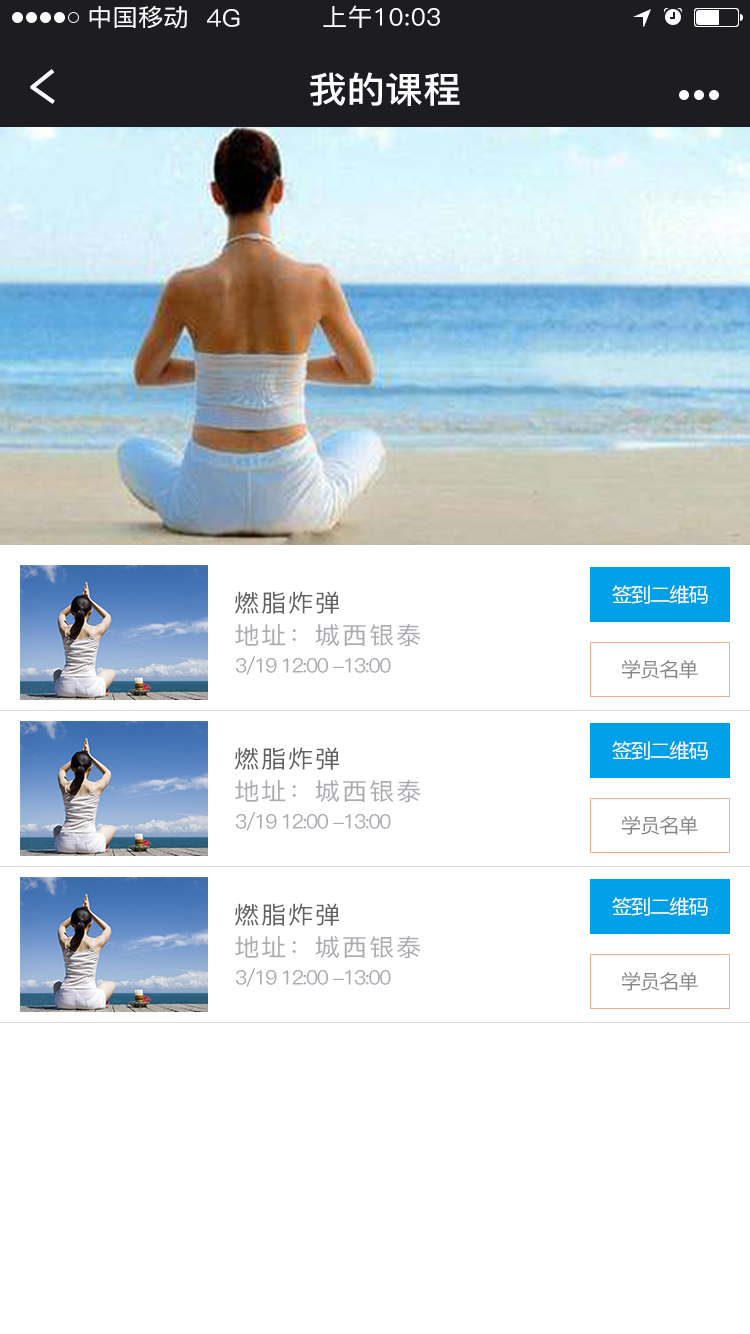
<style>
.page{position:relative;width:750px;height:1334px;background:#ffffff}
.page>*{position:absolute;margin:0}
.t1{font:24px "PingFang-SC-Medium";letter-spacing:0.01em;color:#ffffff;scale:1.05 1}
.t2{font:36px "PingFang-SC-Bold";letter-spacing:0.01em;color:#ffffff;scale:1.05 1}
.t3{font:24px "PingFang-SC-Medium";letter-spacing:0.07em;color:#626060;scale:1.05 1}
.t4{font:20px "PingFang-SC-Medium";letter-spacing:-0.09em;color:#ffffff;scale:1.05 1}
.t5{font:24px "PingFang-SC-Medium";letter-spacing:0.07em;color:#acabb1;scale:1.05 1}
.t6{font:20px "PingFang-SC-Medium";letter-spacing:-0.09em;color:#acabb1;scale:1.05 1}
.t7{font:20px "PingFang-SC-Medium";letter-spacing:-0.09em;color:#858484;scale:1.05 1}
.t8{font:20px "PingFang-SC-Medium";letter-spacing:-0.09em;color:#858383;scale:1.05 1}
</style>
<div class="page">
<p class="t1" style="left:89px;top:6px;width:98px;height:23px">中国移动</p>
<p class="t1" style="left:323px;top:5px;width:117px;height:23px">上午10:03</p>
<p class="t1" style="left:207px;top:9px;width:33px;height:18px">4G</p>
<p class="t2" style="left:310px;top:72px;width:150px;height:34px">我的课程</p>
<p class="t3" style="left:234px;top:591px;width:105px;height:23px">燃脂炸弹</p>
<p class="t4" style="left:612px;top:585px;width:96px;height:19px">签到二维码</p>
<p class="t5" style="left:235px;top:623px;width:186px;height:24px">地址：城西银泰</p>
<p class="t6" style="left:235px;top:656px;width:156px;height:19px">3/19 12:00 -13:00</p>
<p class="t7" style="left:622px;top:660px;width:76px;height:19px">学员名单</p>
<p class="t3" style="left:234px;top:747px;width:105px;height:23px">燃脂炸弹</p>
<p class="t4" style="left:612px;top:741px;width:96px;height:19px">签到二维码</p>
<p class="t5" style="left:235px;top:779px;width:186px;height:24px">地址：城西银泰</p>
<p class="t6" style="left:235px;top:812px;width:156px;height:19px">3/19 12:00 -13:00</p>
<p class="t8" style="left:622px;top:816px;width:76px;height:19px">学员名单</p>
<p class="t3" style="left:234px;top:903px;width:105px;height:23px">燃脂炸弹</p>
<p class="t4" style="left:612px;top:897px;width:96px;height:19px">签到二维码</p>
<p class="t5" style="left:235px;top:935px;width:186px;height:24px">地址：城西银泰</p>
<p class="t6" style="left:235px;top:968px;width:156px;height:19px">3/19 12:00 -13:00</p>
<p class="t8" style="left:622px;top:972px;width:76px;height:19px">学员名单</p>
</div>
